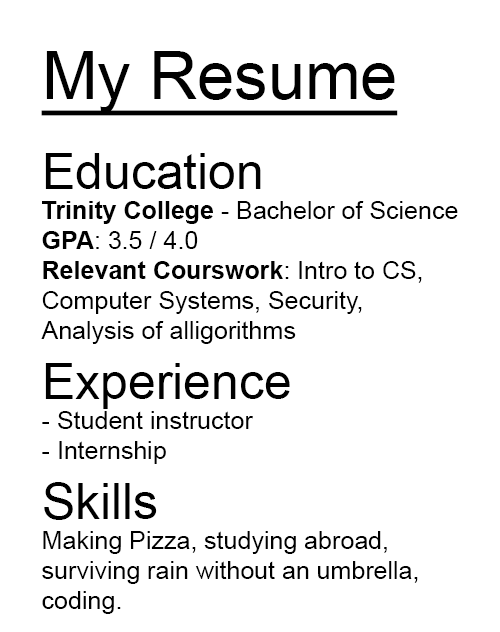
<style>
.page{position:relative;width:500px;height:632px;background:#ffffff}
.page>*{position:absolute;margin:0}
.t1{font:25px "ArialMT";color:#000000}
.t2{font:66.7px "ArialMT";color:#000000;text-decoration:underline}
.t3{font:50px "ArialMT";color:#000000}
.t4{font:25px "Arial-BoldMT";color:#000000}
</style>
<div class="page">
<p class="t1" style="left:41px;top:51px;width:417px;height:563px"><span class="t2">My Resume<br><br></span><span class="t3">Education<br></span><span class="t4">Trinity College </span>- Bachelor of Science<br><span class="t4">GPA</span>: 3.5 / 4.0<br><span class="t4">Relevant Courswork</span>: Intro to CS, <br>Computer Systems, Security,<br>Analysis of alligorithms<span class="t3"><br>Experience<br></span>- Student instructor<br>- Internship<span class="t3"><br>Skills<br></span>Making Pizza, studying abroad, <br>surviving rain without an umbrella, <br>coding.</p>
</div>
